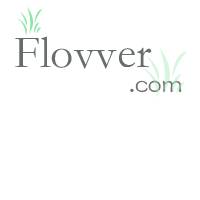
<style>
.page{position:relative;width:200px;height:200px;background:#ffffff}
.page>*{position:absolute;margin:0}
.t1{font:45.8px "STFangsong";color:#676c6d}
.t2{font:25px "FZSTK--GBK1-0";color:#676c6d}
</style>
<div class="page">
<p class="t1" style="left:15px;top:36px;width:137px;height:33px">Flovver</p>
<p class="t2" style="left:130px;top:80px;width:52px;height:13px">.com</p>
</div>
